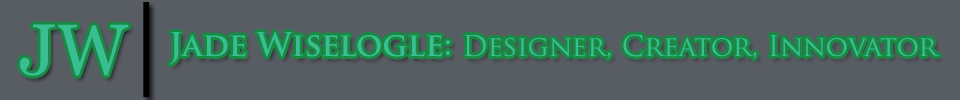
<style>
.page{position:relative;width:960px;height:100px;background:#585c63}
.page>*{position:absolute;margin:0}
.t1{font:100px "Georgia";color:#000000}
.t2{font:72px "Georgia";color:#38be90}
.t3{font:28px "TrajanPro-Regular";color:#38be90}
.t4{font:32px "TrajanPro-Bold";color:#38be90}
</style>
<div class="page">
<p class="t1" style="left:143px;top:2px;width:7px;height:95px">|</p>
<p class="t2" style="left:20px;top:24px;width:35px;height:52px">J</p>
<p class="t2" style="left:56px;top:24px;width:73px;height:52px">W</p>
<p class="t3" style="left:169px;top:32px;width:771px;height:33px"><span class="t4">Jade Wiselogle: </span>Designer, Creator, Innovator</p>
</div>
